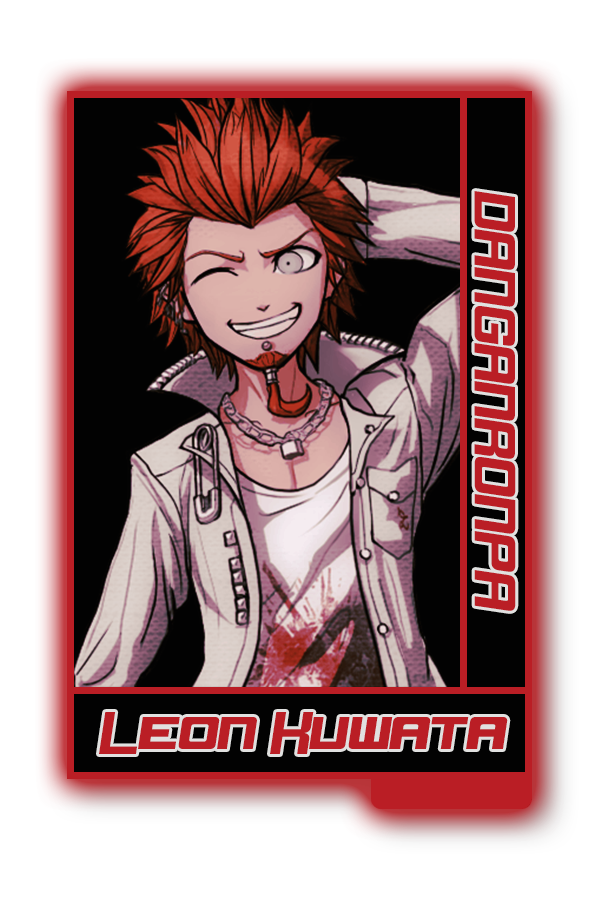
<style>
.page{position:relative;width:600px;height:900px;background:#ffffff}
.page>*{position:absolute;margin:0}
.t1{font:48.8px "DorBlue";color:#bb2c2e}
.t2{font:50.5px "DorBlue";color:#bb2c2e}
</style>
<div class="page">
<p class="t1" style="left:474px;top:191px;width:42px;height:420px;rotate:90deg">DANGANRONPA</p>
<p class="t2" style="left:99px;top:712px;width:409px;height:42px">Leon Kuwata</p>
</div>
